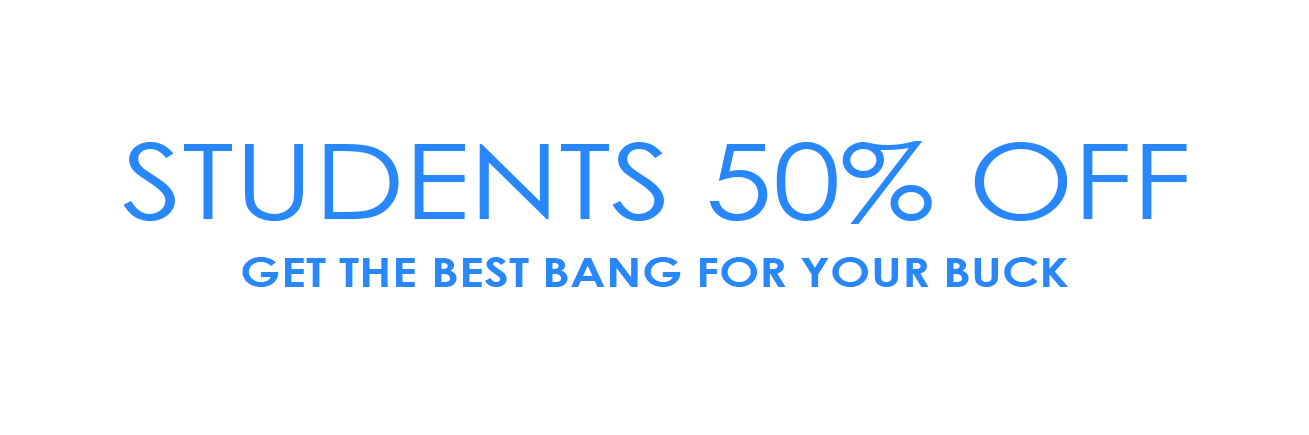
<style>
.page{position:relative;width:1309px;height:435px;background:#ffffff}
.page>*{position:absolute;margin:0}
.t1{font:103.9px "CenturyGothic";color:#2787fb;scale:1.17 1}
.t2{font:41.2px "CenturyGothic-Bold";color:#2787fb;scale:1.17 1}
</style>
<div class="page">
<p class="t1" style="left:123px;top:141px;width:1064px;height:83px">STUDENTS 50% OFF</p>
<p class="t2" style="left:242px;top:257px;width:826px;height:30px">GET THE BEST BANG FOR YOUR BUCK</p>
</div>
